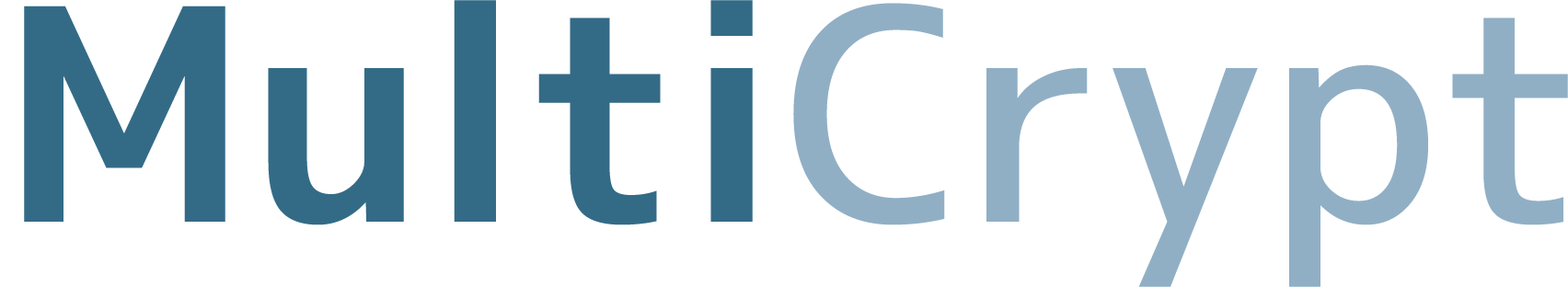
<style>
.page{position:relative;width:1568px;height:287px;background:#ffffff}
.page>*{position:absolute;margin:0}
.t1{font:295.2px "mplus-1c-bold";color:#336b87}
.t2{font:295.2px "mplus-1c-medium";color:#90afc5}
</style>
<div class="page">
<p class="t1" style="left:24px;top:0px;width:1544px;height:287px">Multi<span class="t2">Crypt</span></p>
</div>
